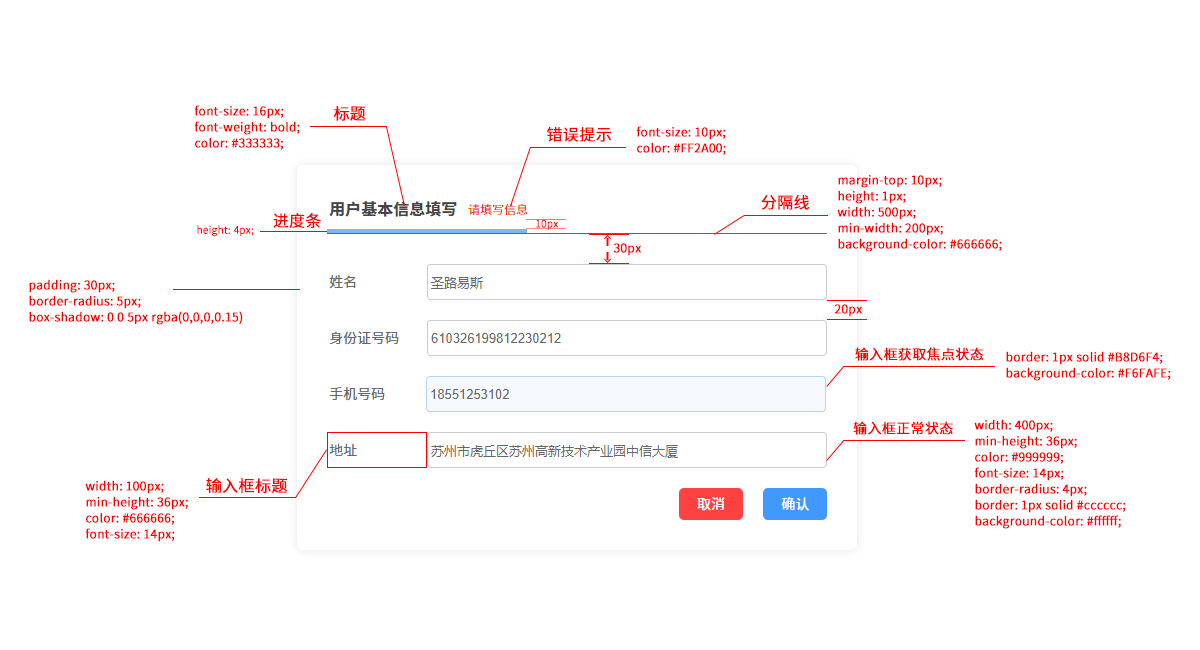
<style>
.page{position:relative;width:1200px;height:650px;background:#ffffff}
.page>*{position:absolute;margin:0}
.t1{font:12px/16px "SourceHanSansCN-Regular";color:#ff0000;font-weight:bold}
.t2{font:16px "SourceHanSansCN-Regular";color:#ff0000;font-weight:bold}
.t3{font:10px "SourceHanSansCN-Regular";color:#ff0000;font-weight:bold}
.t4{font:12px "SourceHanSansCN-Regular";color:#ff0000;font-weight:bold}
.t5{font:14px "SourceHanSansCN-Regular";color:#ff0000;font-weight:bold}
</style>
<div class="page">
<p class="t1" style="left:194px;top:105px;width:106px;height:45px">font-size: 16px;<br>font-weight: bold;<br>color: #333333;</p>
<p class="t2" style="left:333px;top:106px;width:33px;height:15px">标题</p>
<p class="t1" style="left:636px;top:126px;width:90px;height:29px">font-size: 10px;<br>color: #FF2A00;</p>
<p class="t2" style="left:547px;top:127px;width:64px;height:15px">错误提示</p>
<p class="t1" style="left:837px;top:175px;width:165px;height:77px">margin-top: 10px;<br>height: 1px;<br>width: 500px;<br>min-width: 200px;<br>background-color: #666666;</p>
<p class="t2" style="left:761px;top:194px;width:48px;height:16px">分隔线</p>
<p class="t2" style="left:273px;top:213px;width:48px;height:15px">进度条</p>
<p class="t3" style="left:536px;top:219px;width:23px;height:11px">10px</p>
<p class="t3" style="left:197px;top:225px;width:57px;height:12px">height: 4px;</p>
<p class="t4" style="left:613px;top:243px;width:29px;height:13px">30px</p>
<p class="t1" style="left:29px;top:279px;width:214px;height:46px">padding: 30px;<br>border-radius: 5px;<br>box-shadow: 0 0 5px rgba(0,0,0,0.15)</p>
<p class="t4" style="left:834px;top:304px;width:29px;height:13px">20px</p>
<p class="t5" style="left:855px;top:347px;width:129px;height:14px">输入框获取焦点状态</p>
<p class="t1" style="left:1006px;top:351px;width:165px;height:30px">border: 1px solid #B8D6F4;<br>background-color: #F6FAFE;</p>
<p class="t5" style="left:853px;top:421px;width:100px;height:14px">输入框正常状态</p>
<p class="t1" style="left:974px;top:419px;width:152px;height:110px">width: 400px;<br>min-height: 36px;<br>color: #999999;<br>font-size: 14px;<br>border-radius: 4px;<br>border: 1px solid #cccccc;<br>background-color: #ffffff;</p>
<p class="t1" style="left:85px;top:480px;width:103px;height:62px">width: 100px;<br>min-height: 36px;<br>color: #666666;<br>font-size: 14px;</p>
<p class="t2" style="left:206px;top:478px;width:81px;height:15px">输入框标题</p>
</div>
